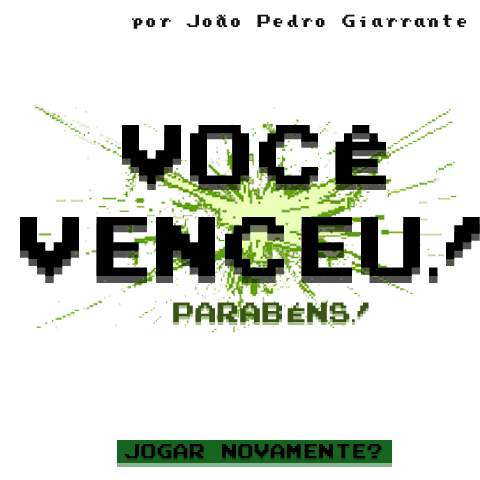
<style>
.page{position:relative;width:480px;height:480px;background:#ffffff}
.page>*{position:absolute;margin:0}
.t1{font:14px "PressStartReg";letter-spacing:0.01em;color:#141414}
.t2{font:67.6px/92.3px "PressStartReg";letter-spacing:0.01em;color:#000000}
.t3{font:22.1px "PressStartReg";letter-spacing:0.01em}
.t4{font:22.1px "PressStartReg";letter-spacing:0.01em;color:#395415}
.t5{font:16px "PressStartReg";letter-spacing:0.01em;color:#000000}
</style>
<div class="page">
<p class="t1" style="left:132px;top:14px;width:334px;height:15px">por João Pedro Giarrante</p>
<p class="t2" style="left:20px;top:125px;width:460px;height:151px;text-align:center">VOCÊ<br>VENCEU!</p>
<p class="t2" style="left:20px;top:131px;width:460px;height:152px;text-align:center;opacity:0.68">VOCÊ<br>VENCEU!</p>
<p class="t3" style="left:173px;top:305px;width:196px;height:20px">PARABÉNS!</p>
<p class="t4" style="left:173px;top:302px;width:196px;height:20px">PARABÉNS!</p>
<p class="t5" style="left:125px;top:446px;width:257px;height:14px;opacity:0.36">JOGAR NOVAMENTE?</p>
<p class="t5" style="left:125px;top:444px;width:257px;height:14px">JOGAR NOVAMENTE?</p>
</div>
